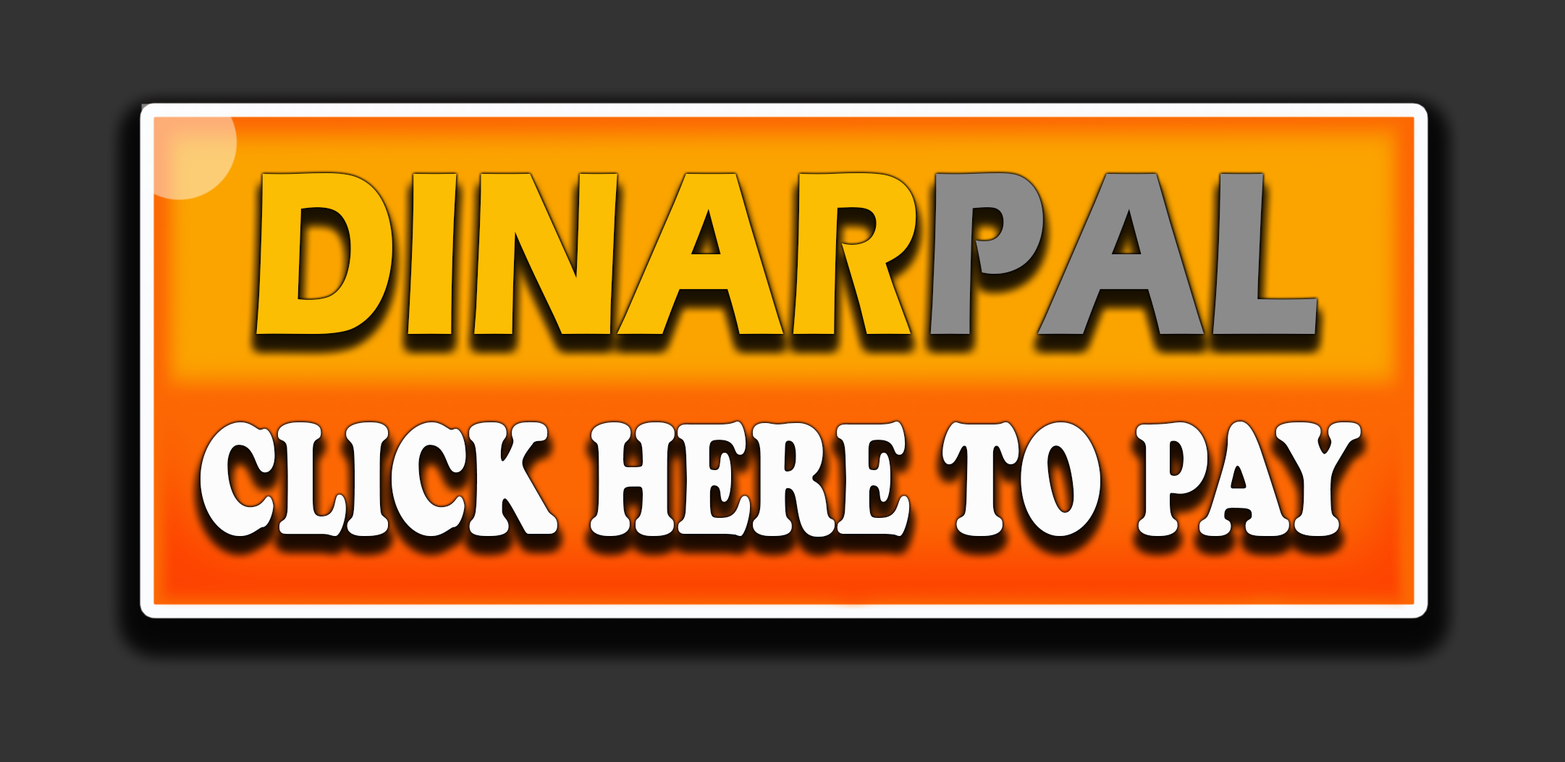
<style>
.page{position:relative;width:1565px;height:762px;background:#333333}
.page>*{position:absolute;margin:0}
.t1{font:239.9px "ErasITC-Bold";color:#fcbe03;scale:0.81 1}
.t2{font:239.9px "ErasITC-Bold";color:#8b8b8c;scale:0.81 1}
.t3{font:156px "CooperBlackStd";color:#fcfcfd;scale:0.66 1}
</style>
<div class="page">
<p class="t1" style="left:256px;top:173px;width:1062px;height:161px">DINAR<span class="t2">PAL</span></p>
<p class="t3" style="left:201px;top:421px;width:1160px;height:116px">CLICK HERE TO PAY</p>
</div>
